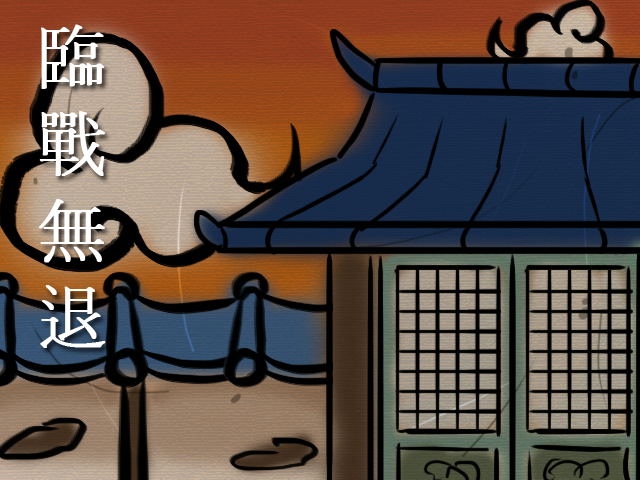
<style>
.page{position:relative;width:640px;height:480px}
.page>*{position:absolute;margin:0}
.t1{font:72px "GungsuhChe";color:#ffffff;font-weight:bold}
</style>
<div class="page">
<p class="t1" style="left:39px;top:24px;width:67px;height:324px;text-align:center">臨<br>戰<br>無<br>退</p>
</div>
